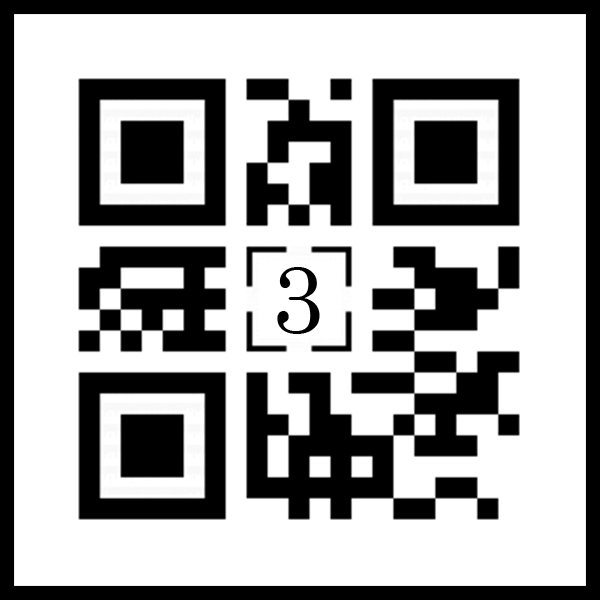
<style>
.page{position:relative;width:600px;height:600px;background:#ffffff}
.page>*{position:absolute;margin:0}
.t1{font:95.2px "Century";color:#000000}
</style>
<div class="page">
<p class="t1" style="left:277px;top:267px;width:43px;height:67px">3</p>
</div>
